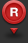
<style>
.page{position:relative;width:28px;height:43px;background:#333333}
.page>*{position:absolute;margin:0}
.t1{font:12px "HelveticaNeue-Bold";color:#ffffff}
</style>
<div class="page">
<p class="t1" style="left:10px;top:7px;width:8px;height:10px">R</p>
</div>
